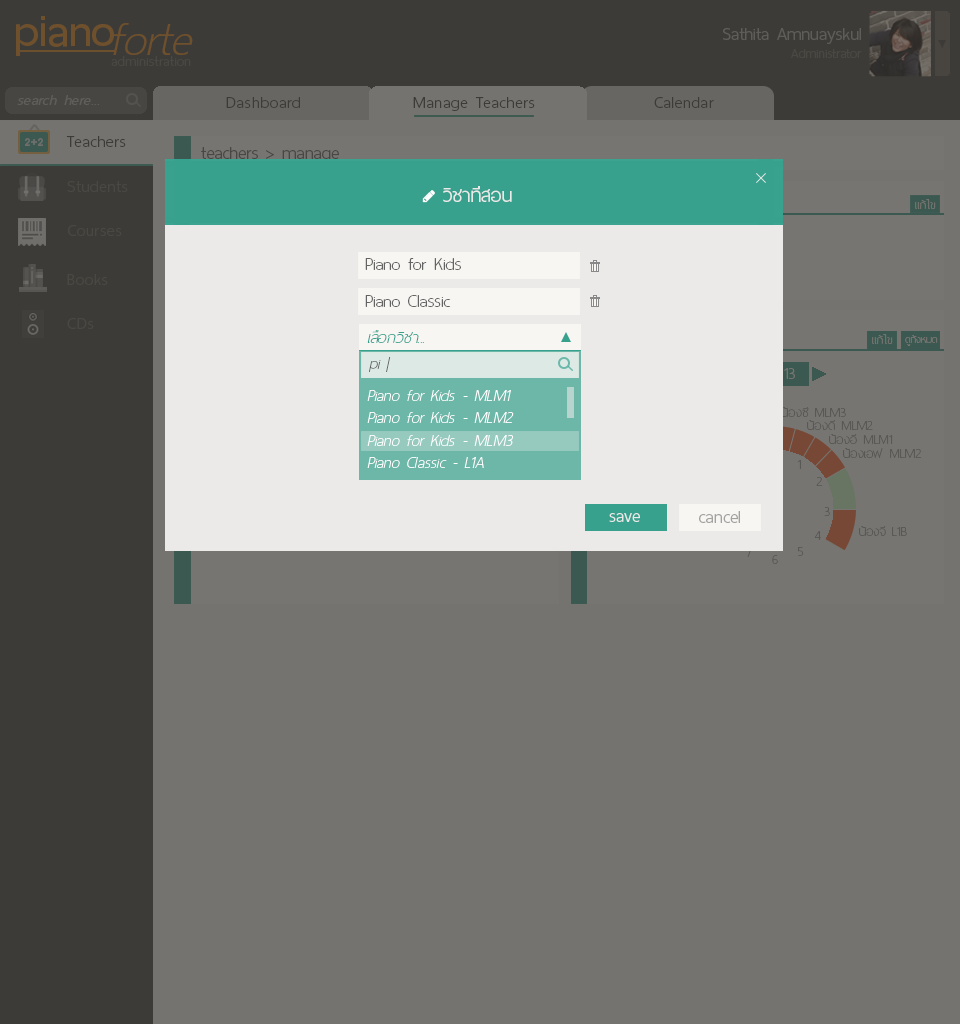
<style>
.page{position:relative;width:960px;height:1024px;background:#75736f}
.page>*{position:absolute;margin:0}
.t1{font:60px "ThaiSansNeue-SemiBold";letter-spacing:-0.005em;color:#6e502c}
.t2{font:62px "ThaiSansNeue-ExtraLightItalic";letter-spacing:-0.005em;color:#6e502c}
.t3{font:24px "ThaiSansNeue-Light";letter-spacing:-0.005em;color:#5f5d5a}
.t4{font:18px "ThaiSansNeue-Light";letter-spacing:-0.005em;color:#4a4843}
.t5{font:18.5px "ThaiSansNeue-ExtraLight";letter-spacing:0.025em;color:#4a4843}
.t6{font:20px "ThaiSansNeue-LightItalic";letter-spacing:0.025em;color:#605e5a}
.t7{font:22px "ThaiSansNeue-Light";letter-spacing:0.025em;color:#3d3b37}
.t8{font:24px "ThaiSansNeue-Light";letter-spacing:-0.005em;color:#484744}
.t9{font:22px "ThaiSansNeue-Light";letter-spacing:0.025em;color:#4a4843}
.t10{font:26px "ThaiSansNeue-Light";letter-spacing:-0.005em;color:#ebeae8}
.t11{font:16px "ThaiSansNeue-UltraLight";color:#777572}
.t12{font:24px "ThaiSansNeue-UltraLight";color:#636363}
.t13{font:22px "ThaiSansNeue-UltraLightItalic";color:#37a18e}
.t14{font:14px "ThaiSansNeue-UltraLight";color:#777572}
.t15{font:22px "ThaiSansNeue-UltraLightItalic";color:#636363}
.t16{font:22px "ThaiSansNeue-UltraLightItalic";color:#ffffff}
.t17{font:18px "ThaiSansNeue-UltraLight";letter-spacing:0.01em;color:#5a5855}
.t18{font:24px "ThaiSansNeue-Light";letter-spacing:-0.005em;color:#ebeae8}
.t19{font:24px "ThaiSansNeue-Light";color:#a2a1a0}
.t20{font:18px "ThaiSansNeue-UltraLight";color:#5a5855}
.t21{font:18px "ThaiSansNeue-UltraLight";letter-spacing:0.01em}
</style>
<div class="page">
<p class="t1" style="left:16px;top:16px;width:98px;height:40px">piano</p>
<p class="t2" style="left:113px;top:23px;width:80px;height:32px">forte</p>
<p class="t3" style="left:723px;top:28px;width:138px;height:16px">Sathita Amnuayskul</p>
<p class="t4" style="left:791px;top:49px;width:71px;height:9px">Administrator</p>
<p class="t5" style="left:111px;top:56px;width:80px;height:10px">administration</p>
<p class="t6" style="left:17px;top:95px;width:83px;height:10px">search here...</p>
<p class="t7" style="left:226px;top:97px;width:74px;height:11px">Dashboard</p>
<p class="t7" style="left:413px;top:97px;width:122px;height:14px">Manage Teachers</p>
<p class="t7" style="left:654px;top:97px;width:60px;height:11px">Calendar</p>
<p class="t7" style="left:66px;top:136px;width:60px;height:11px">Teachers</p>
<p class="t8" style="left:201px;top:147px;width:138px;height:16px">teachers &gt; manage</p>
<p class="t9" style="left:67px;top:181px;width:61px;height:11px">Students</p>
<p class="t10" style="left:443px;top:186px;width:69px;height:16px">วิชาที่สอน</p>
<p class="t11" style="left:915px;top:199px;width:21px;height:10px">แก้ไข</p>
<p class="t9" style="left:68px;top:225px;width:54px;height:11px">Courses</p>
<p class="t12" style="left:365px;top:258px;width:96px;height:12px">Piano for Kids</p>
<p class="t9" style="left:67px;top:274px;width:41px;height:11px">Books</p>
<p class="t12" style="left:365px;top:295px;width:86px;height:12px">Piano Classic</p>
<p class="t9" style="left:67px;top:318px;width:27px;height:11px">CDs</p>
<p class="t13" style="left:367px;top:330px;width:57px;height:13px">เลือกวิชา...</p>
<p class="t11" style="left:872px;top:334px;width:21px;height:10px">แก้ไข</p>
<p class="t14" style="left:905px;top:335px;width:33px;height:11px">ดูทั้งหมด</p>
<p class="t15" style="left:369px;top:357px;width:22px;height:15px">pi |</p>
<p class="t16" style="left:367px;top:390px;width:144px;height:11px">Piano for Kids - MLM1</p>
<p class="t16" style="left:367px;top:412px;width:147px;height:11px">Piano for Kids - MLM2</p>
<p class="t17" style="left:781px;top:407px;width:65px;height:10px">น้องซี MLM3</p>
<p class="t17" style="left:807px;top:420px;width:66px;height:10px">น้องดี MLM2</p>
<p class="t16" style="left:367px;top:435px;width:146px;height:11px">Piano for Kids - MLM3</p>
<p class="t17" style="left:829px;top:434px;width:64px;height:10px">น้องอี MLM1</p>
<p class="t17" style="left:843px;top:448px;width:79px;height:10px">น้องเอฟ MLM2</p>
<p class="t16" style="left:367px;top:457px;width:117px;height:11px">Piano Classic - L1A</p>
<p class="t17" style="left:797px;top:460px;width:4px;height:9px">1</p>
<p class="t17" style="left:816px;top:477px;width:7px;height:9px">2</p>
<p class="t17" style="left:824px;top:507px;width:6px;height:9px">3</p>
<p class="t18" style="left:609px;top:513px;width:31px;height:9px">save</p>
<p class="t19" style="left:699px;top:511px;width:41px;height:12px">cancel</p>
<p class="t17" style="left:814px;top:531px;width:7px;height:9px">4</p>
<p class="t20" style="left:859px;top:526px;width:48px;height:10px">น้องจี L1B</p>
<p class="t21" style="left:772px;top:555px;width:6px;height:9px">6</p>
<p class="t17" style="left:798px;top:547px;width:6px;height:9px">5</p>
</div>
